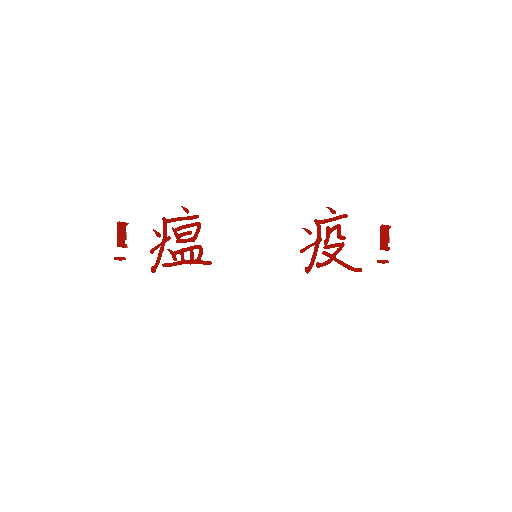
<style>
.page{position:relative;width:512px;height:512px;background:#ffffff}
.page>*{position:absolute;margin:0}
.t1{font:74px "ShouShuti";color:#ad180d}
</style>
<div class="page">
<p class="t1" style="left:150px;top:206px;width:212px;height:68px">瘟    疫</p>
</div>
